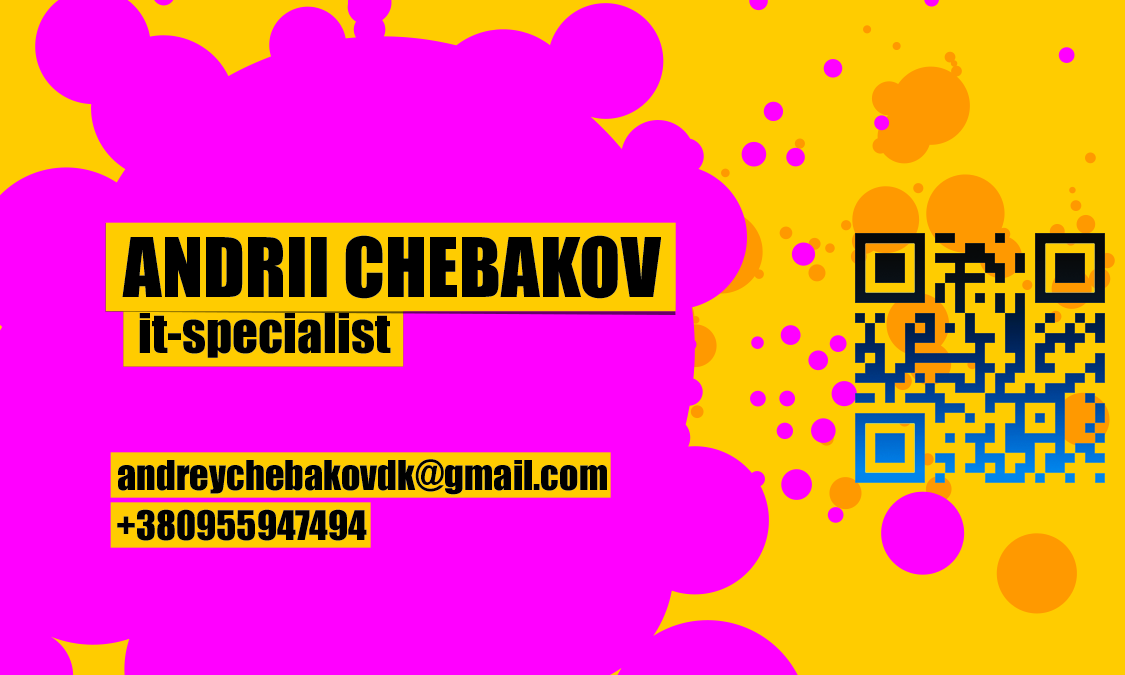
<style>
.page{position:relative;width:1125px;height:675px;background:#ff00ff}
.page>*{position:absolute;margin:0}
.t1{font:76px "Impact";color:#000000;text-transform:uppercase}
.t2{font:50.7px "Impact";color:#000000}
.t3{font:38px "Impact";color:#000000}
.t4{font:37.5px "Impact";color:#000000}
</style>
<div class="page">
<p class="t1" style="left:122px;top:235px;width:539px;height:64px">andrii chebakov</p>
<p class="t2" style="left:139px;top:313px;width:252px;height:45px">it-specialist</p>
<p class="t3" style="left:118px;top:459px;width:489px;height:36px">andreychebakovdk@gmail.com</p>
<p class="t4" style="left:117px;top:509px;width:250px;height:32px">+380955947494</p>
</div>
